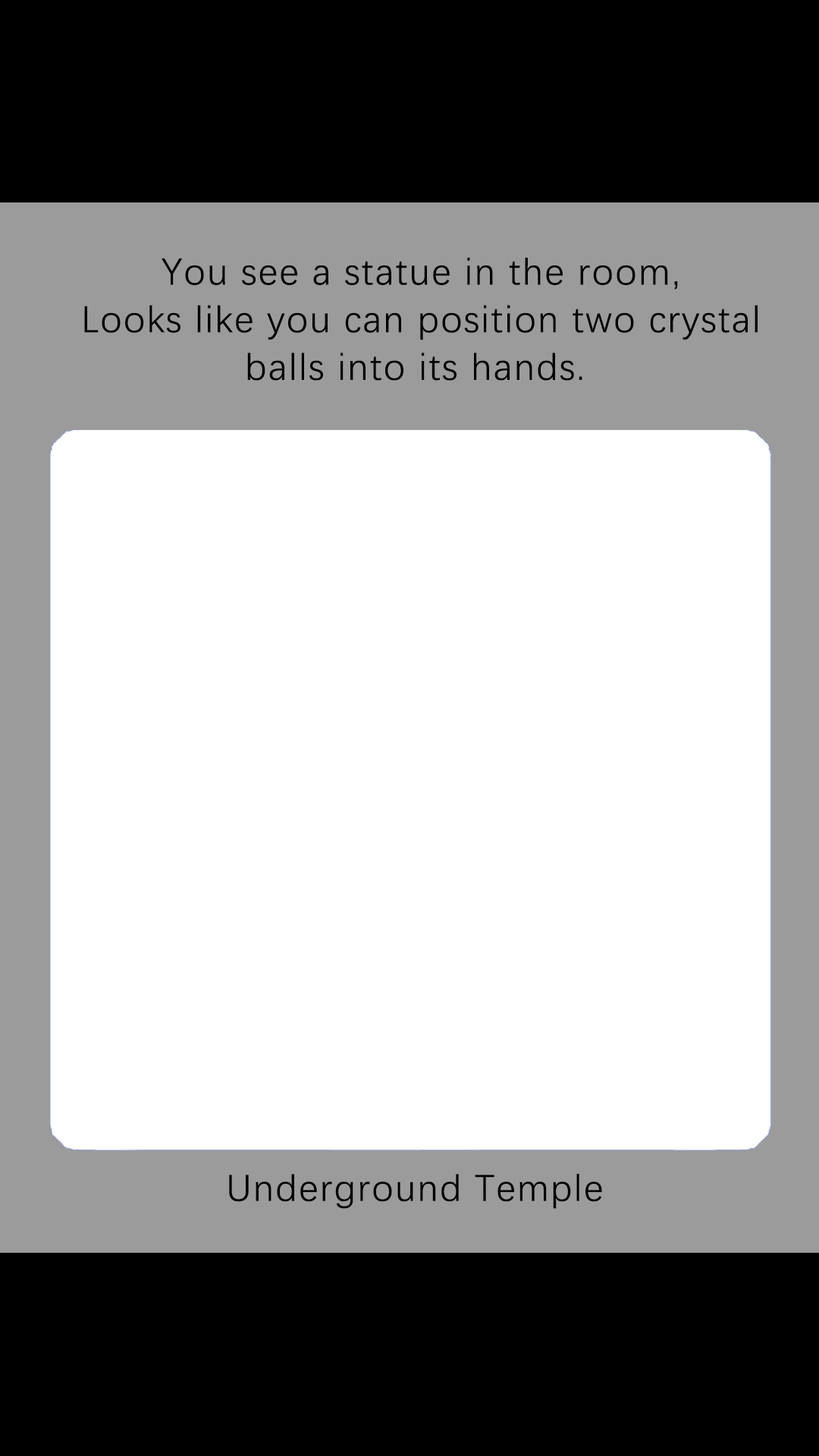
<style>
.page{position:relative;width:819px;height:1456px;background:#ffffff}
.page>*{position:absolute;margin:0}
.t1{font:37.9px/47.6px "DengXian-Regular";letter-spacing:0.04em;color:#000000}
.t2{font:37.9px "DengXian-Regular";letter-spacing:0.04em;color:#000000}
</style>
<div class="page">
<p class="t1" style="left:84px;top:257px;width:674px;height:124px;text-align:center">You see a statue in the room,<br>Looks like you can position two crystal<br>balls into its hands.</p>
<p class="t2" style="left:229px;top:1174px;width:373px;height:35px">Underground Temple</p>
</div>
